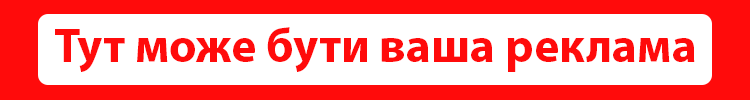
<style>
.page{position:relative;width:750px;height:100px;background:#ffffff}
.page>*{position:absolute;margin:0}
.t1{font:48px "MyriadPro-Bold";color:#ff0b0b}
</style>
<div class="page">
<p class="t1" style="left:55px;top:27px;width:640px;height:45px">Тут може бути ваша реклама</p>
</div>
